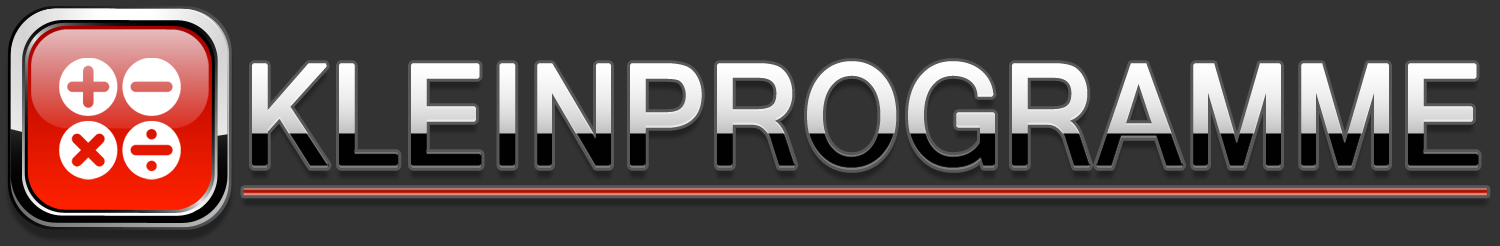
<style>
.page{position:relative;width:1500px;height:246px;background:#333333}
.page>*{position:absolute;margin:0}
.t1{font:140.6px "MicrosoftSansSerif";text-transform:uppercase;font-weight:bold;text-decoration:underline;scale:0.89 1}
</style>
<div class="page">
<p class="t1" style="left:243px;top:61px;width:1245px;height:135px">KLEINPROGRAMME</p>
</div>
